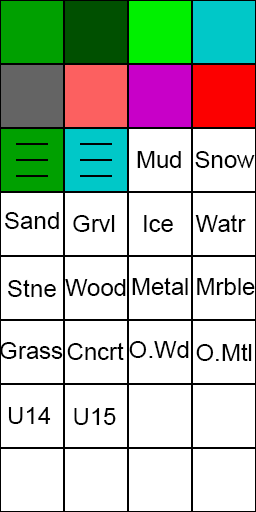
<style>
.page{position:relative;width:256px;height:512px;background:#ffffff}
.page>*{position:absolute;margin:0}
.t1{font:24px "ArialMT";color:#000000}
</style>
<div class="page">
<p class="t1" style="left:137px;top:151px;width:44px;height:17px">Mud</p>
<p class="t1" style="left:195px;top:151px;width:60px;height:17px">Snow</p>
<p class="t1" style="left:5px;top:212px;width:54px;height:17px">Sand</p>
<p class="t1" style="left:73px;top:215px;width:42px;height:17px">Grvl</p>
<p class="t1" style="left:144px;top:215px;width:29px;height:17px">Ice</p>
<p class="t1" style="left:195px;top:214px;width:51px;height:18px">Watr</p>
<p class="t1" style="left:8px;top:279px;width:48px;height:18px">Stne</p>
<p class="t1" style="left:65px;top:279px;width:61px;height:17px">Wood</p>
<p class="t1" style="left:132px;top:277px;width:56px;height:18px">Metal</p>
<p class="t1" style="left:197px;top:278px;width:58px;height:17px">Mrble</p>
<p class="t1" style="left:0px;top:342px;width:63px;height:17px">Grass</p>
<p class="t1" style="left:67px;top:342px;width:57px;height:18px">Cncrt</p>
<p class="t1" style="left:129px;top:341px;width:60px;height:17px">O.Wd</p>
<p class="t1" style="left:196px;top:343px;width:56px;height:18px">O.Mtl</p>
<p class="t1" style="left:8px;top:407px;width:43px;height:17px">U14</p>
<p class="t1" style="left:74px;top:408px;width:42px;height:17px">U15</p>
</div>
